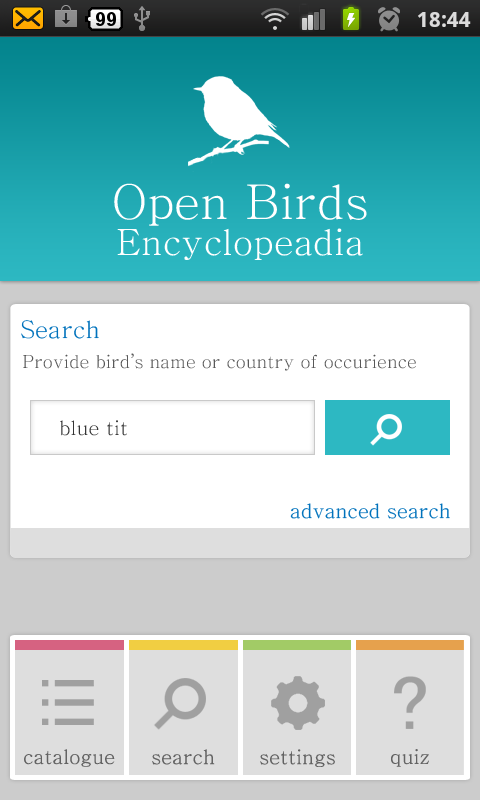
<style>
.page{position:relative;width:480px;height:800px;background:#ffffff}
.page>*{position:absolute;margin:0}
.t1{font:36px/36px "Chrysanthi-Unicode";color:#ffffff}
.t2{font:48px/36px "Chrysanthi-Unicode";color:#ffffff}
.t3{font:24px "Chrysanthi-Unicode";color:#0072bc}
.t4{font:18px "Chrysanthi-Unicode";color:#585858}
.t5{font:20px "Chrysanthi-Unicode";color:#353535}
.t6{font:20px "Chrysanthi-Unicode";color:#0072bc}
.t7{font:20px "Chrysanthi-Unicode";color:#636363}
</style>
<div class="page">
<p class="t1" style="left:114px;top:183px;width:253px;height:77px;text-align:center"><span class="t2">Open Birds<br></span>Encyclopeadia</p>
<p class="t3" style="left:21px;top:320px;width:78px;height:19px">Search</p>
<p class="t4" style="left:23px;top:353px;width:393px;height:18px">Provide bird’s name or country of occurience</p>
<p class="t5" style="left:60px;top:420px;width:67px;height:16px">blue tit</p>
<p class="t6" style="left:290px;top:503px;width:160px;height:16px">advanced search</p>
<p class="t7" style="left:24px;top:749px;width:91px;height:18px">catalogue</p>
<p class="t7" style="left:152px;top:749px;width:63px;height:16px">search</p>
<p class="t7" style="left:260px;top:749px;width:75px;height:18px">settings</p>
<p class="t7" style="left:391px;top:749px;width:38px;height:18px">quiz</p>
</div>
